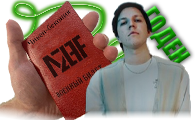
<style>
.page{position:relative;width:195px;height:120px}
.page>*{position:absolute;margin:0}
.t1{font:24.5px "Impact"}
</style>
<div class="page">
<p class="t1" style="left:139px;top:5px;width:52px;height:62px;rotate:55deg">ГОДЕН</p>
</div>
